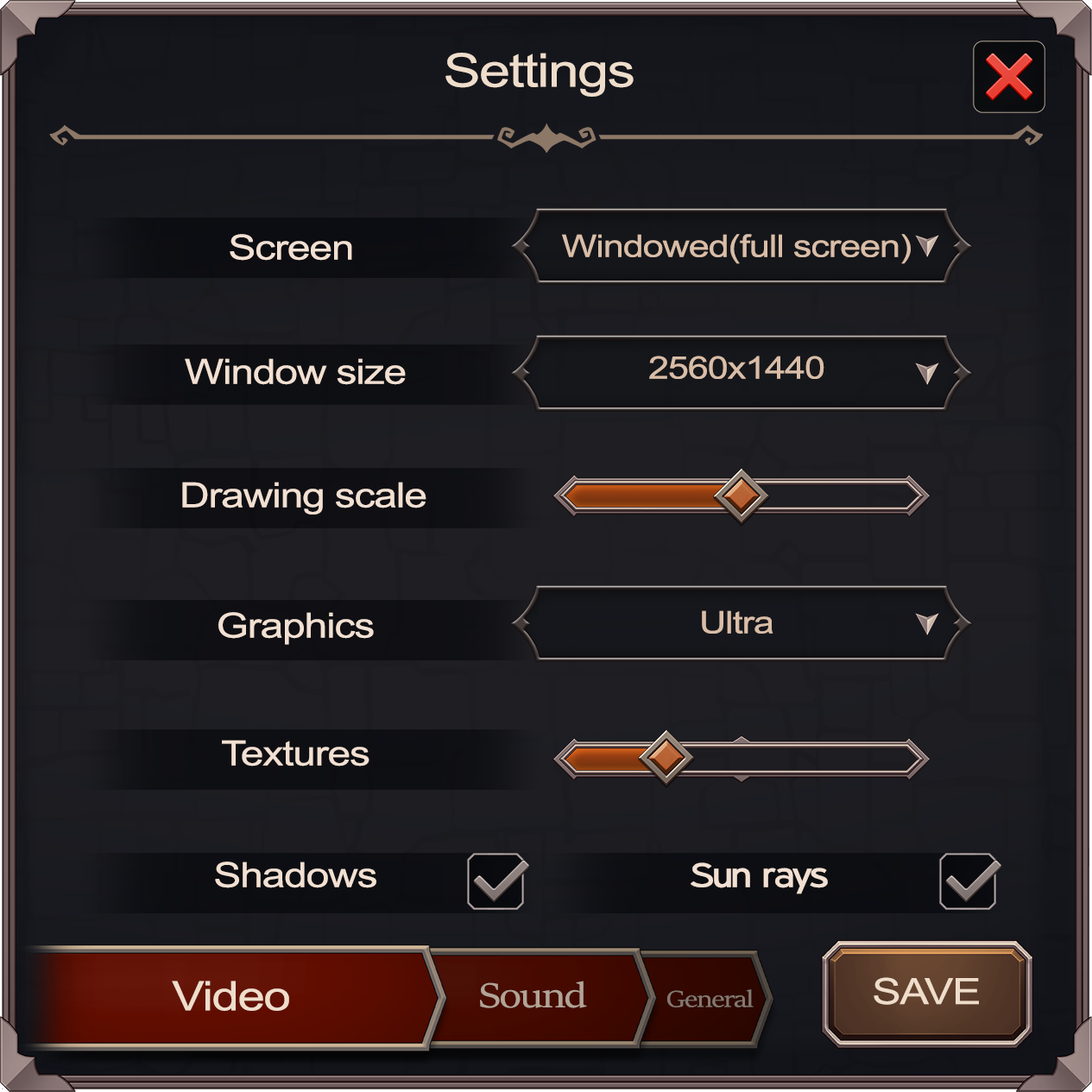
<style>
.page{position:relative;width:1092px;height:1092px}
.page>*{position:absolute;margin:0}
.t1{font:46.5px "ArialMT";letter-spacing:-0.025em;color:#efddcb;scale:1.2 1}
.t2{font:34.5px "ArialMT";letter-spacing:-0.025em;color:#f2e0d2;scale:1.2 1}
.t3{font:31.1px "ArialMT";letter-spacing:-0.025em;color:#d9bda7;scale:1.2 1}
.t4{font:34.5px "ExpresswayFree";letter-spacing:-0.025em;color:#f2e0d2;scale:1.2 1}
.t5{font:36.1px "ArialMT";letter-spacing:-0.025em;color:#efddcb;scale:1.2 1}
.t6{font:40.6px "ArialMT";letter-spacing:-0.025em;color:#efddcb;scale:1.2 1}
</style>
<div class="page">
<p class="t1" style="left:445px;top:53px;width:189px;height:44px">Settings</p>
<p class="t2" style="left:230px;top:234px;width:122px;height:27px">Screen</p>
<p class="t3" style="left:562px;top:234px;width:349px;height:30px">Windowed(full screen)</p>
<p class="t2" style="left:185px;top:358px;width:221px;height:27px">Window size</p>
<p class="t3" style="left:649px;top:356px;width:175px;height:23px">2560x1440</p>
<p class="t2" style="left:182px;top:482px;width:244px;height:32px">Drawing scale</p>
<p class="t2" style="left:218px;top:612px;width:156px;height:33px">Graphics</p>
<p class="t3" style="left:702px;top:610px;width:71px;height:24px">Ultra</p>
<p class="t2" style="left:222px;top:740px;width:147px;height:27px">Textures</p>
<p class="t2" style="left:215px;top:862px;width:161px;height:26px">Shadows</p>
<p class="t4" style="left:691px;top:862px;width:137px;height:32px">Sun rays</p>
<p class="t5" style="left:874px;top:977px;width:105px;height:28px">SAVE</p>
<p class="t6" style="left:172px;top:981px;width:117px;height:30px">Video</p>
</div>
